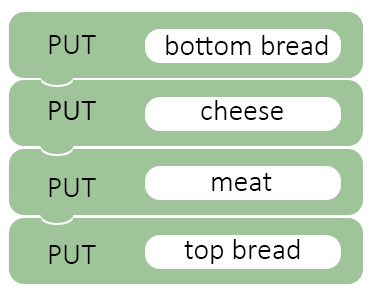
<style>
.page{position:relative;width:374px;height:294px;background:#a0c49a}
.page>*{position:absolute;margin:0}
.t1{font:30px "Calibri-Light";color:#000000}
</style>
<div class="page">
<p class="t1" style="left:49px;top:35px;width:47px;height:19px">PUT</p>
<p class="t1" style="left:166px;top:35px;width:162px;height:20px">bottom bread</p>
<p class="t1" style="left:201px;top:100px;width:82px;height:20px">cheese</p>
<p class="t1" style="left:212px;top:173px;width:60px;height:18px">meat</p>
<p class="t1" style="left:49px;top:178px;width:47px;height:19px">PUT</p>
<p class="t1" style="left:49px;top:245px;width:47px;height:19px">PUT</p>
<p class="t1" style="left:184px;top:239px;width:116px;height:25px">top bread</p>
</div>
